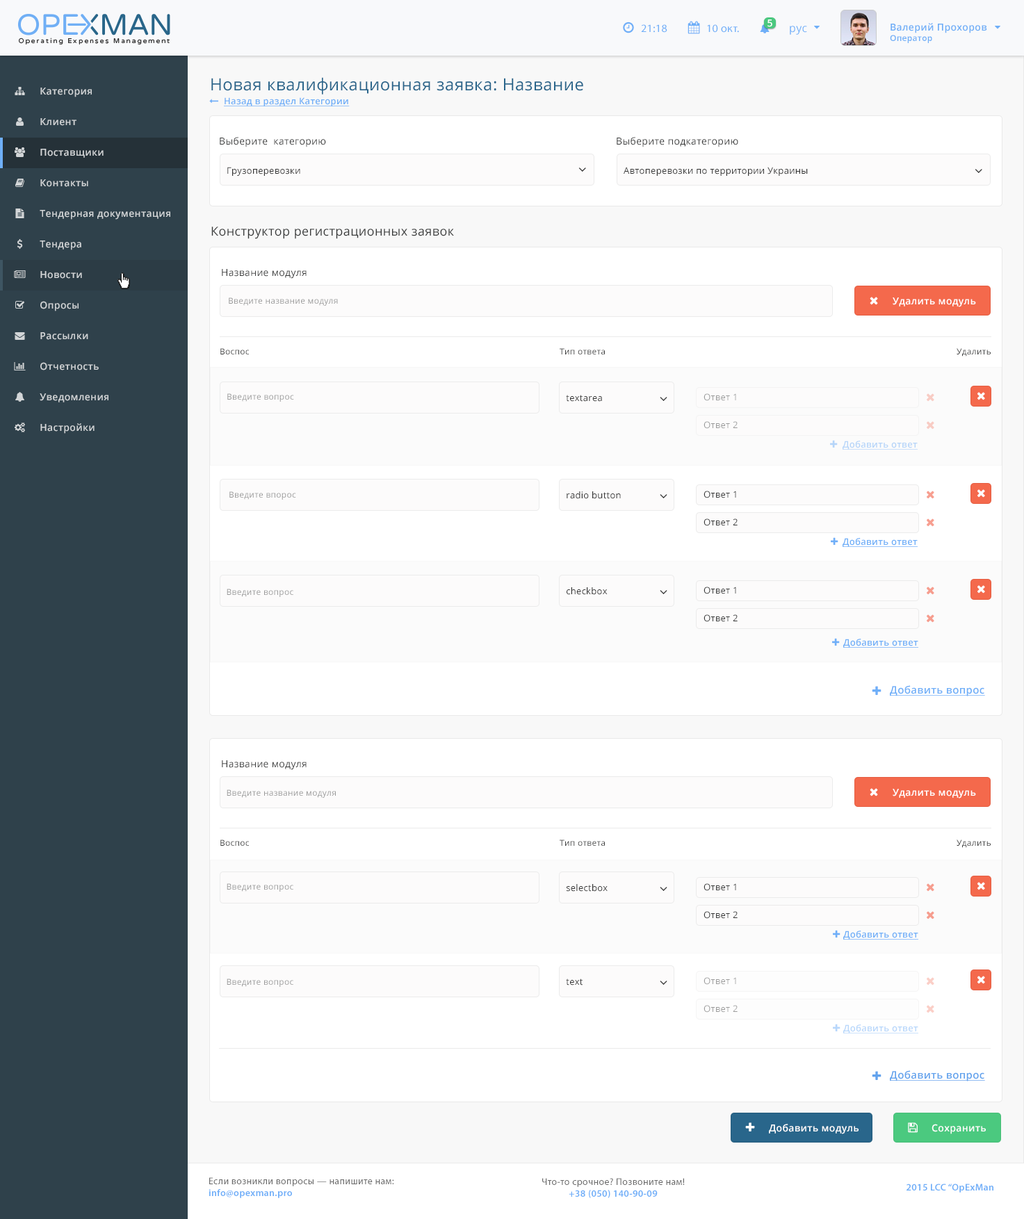
<style>
.page{position:relative;width:1024px;height:1219px;background:#ffffff}
.page>*{position:absolute;margin:0}
.t1{font:11.1px "MyriadPro-Regular";letter-spacing:0.025em;color:#6faff8}
.t2{font:9.7px "OpenSans-Semibold";letter-spacing:0.025em;color:#ffffff}
.t3{font:11.1px "OpenSans";letter-spacing:0.025em;color:#6eaff8}
.t4{font:9.7px "OpenSans-Semibold";letter-spacing:0.025em;color:#6eaef7}
.t5{font:8.3px "OpenSans-Semibold";letter-spacing:0.025em;color:#6eaef7}
.t6{font:16.6px "OpenSans";letter-spacing:0.025em;color:#29658b}
.t7{font:9.7px "OpenSans-Semibold";letter-spacing:0.025em;color:#d2d5d7}
.t8{font:9px "OpenSans-Semibold";letter-spacing:0.025em;color:#6faff8;text-decoration:underline}
.t9{font:9.7px "OpenSans";letter-spacing:0.025em;color:#373838}
.t10{font:9px "OpenSans";letter-spacing:0.025em;color:#333333}
.t11{font:12.5px "OpenSans";letter-spacing:0.025em;color:#373838}
.t12{font:8.3px "OpenSans";letter-spacing:0.025em;color:#999999}
.t13{font:8.3px "OpenSans";letter-spacing:0.025em;color:#373838}
.t14{font:9px "OpenSans";letter-spacing:0.025em;color:#999999}
.t15{font:9px "OpenSans-Semibold";letter-spacing:0.025em;color:#b5d5f9;text-decoration:underline}
.t16{font:9px "OpenSans";letter-spacing:0.025em;color:#373838}
.t17{font:10.4px "OpenSans-Semibold";letter-spacing:0.025em;color:#6faff8;text-decoration:underline}
.t18{font:9px "OpenSans";letter-spacing:0.025em;color:#9b9b9b}
.t19{font:9px "OpenSans-Semibold";letter-spacing:0.025em;color:#b7d7fb;text-decoration:underline}
.t20{font:10.4px "OpenSans-Semibold";letter-spacing:0.025em;color:#62a3ed;text-decoration:underline}
.t21{font:9.7px "MyriadPro-Regular";letter-spacing:0.025em;color:#696969}
.t22{font:9.7px "MyriadPro-Semibold";letter-spacing:0.025em;color:#6eaef8}
</style>
<div class="page">
<p class="t1" style="left:641px;top:24px;width:26px;height:9px">21:18</p>
<p class="t1" style="left:707px;top:24px;width:32px;height:9px">10 окт.</p>
<p class="t2" style="left:767px;top:19px;width:5px;height:8px">5</p>
<p class="t3" style="left:789px;top:26px;width:18px;height:9px">рус</p>
<p class="t4" style="left:889px;top:23px;width:98px;height:20px">Валерий Прохоров<br><span class="t5">Оператор</span></p>
<p class="t6" style="left:211px;top:77px;width:372px;height:18px">Новая квалификационная заявка: Название</p>
<p class="t7" style="left:40px;top:88px;width:52px;height:9px">Категория</p>
<p class="t8" style="left:224px;top:97px;width:126px;height:9px">Назад в раздел Категории</p>
<p class="t7" style="left:40px;top:118px;width:36px;height:8px">Клиент</p>
<p class="t9" style="left:220px;top:137px;width:106px;height:10px">Выберите  категорию</p>
<p class="t9" style="left:616px;top:137px;width:122px;height:10px">Выберите подкатегорию</p>
<p class="t7" style="left:40px;top:149px;width:64px;height:9px">Поставщики</p>
<p class="t10" style="left:227px;top:167px;width:73px;height:9px">Грузоперевозки</p>
<p class="t10" style="left:623px;top:167px;width:184px;height:9px">Автоперевозки по территории Украины</p>
<p class="t7" style="left:40px;top:179px;width:48px;height:8px">Контакты</p>
<p class="t7" style="left:40px;top:210px;width:130px;height:10px">Тендерная документация</p>
<p class="t11" style="left:211px;top:227px;width:243px;height:12px">Конструктор регистрационных заявок</p>
<p class="t7" style="left:40px;top:240px;width:41px;height:10px">Тендера</p>
<p class="t9" style="left:222px;top:269px;width:84px;height:10px">Название модуля</p>
<p class="t7" style="left:40px;top:271px;width:42px;height:8px">Новости</p>
<p class="t7" style="left:40px;top:301px;width:39px;height:10px">Опросы</p>
<p class="t12" style="left:229px;top:297px;width:109px;height:9px">Введите название модуля</p>
<p class="t2" style="left:892px;top:297px;width:84px;height:10px">Удалить модуль</p>
<p class="t7" style="left:40px;top:332px;width:48px;height:8px">Рассылки</p>
<p class="t13" style="left:220px;top:348px;width:29px;height:6px">Воспос</p>
<p class="t13" style="left:559px;top:348px;width:46px;height:6px">Тип ответа</p>
<p class="t13" style="left:956px;top:348px;width:34px;height:8px">Удалить</p>
<p class="t7" style="left:40px;top:362px;width:59px;height:8px">Отчетность</p>
<p class="t7" style="left:40px;top:393px;width:68px;height:9px">Уведомления</p>
<p class="t12" style="left:227px;top:393px;width:67px;height:9px">Введите вопрос</p>
<p class="t10" style="left:566px;top:395px;width:36px;height:7px">textarea</p>
<p class="t14" style="left:703px;top:393px;width:33px;height:8px">Ответ 1</p>
<p class="t7" style="left:40px;top:423px;width:55px;height:11px">Настройки</p>
<p class="t14" style="left:703px;top:421px;width:34px;height:8px">Ответ 2</p>
<p class="t15" style="left:842px;top:441px;width:75px;height:9px">Добавить ответ</p>
<p class="t12" style="left:229px;top:491px;width:67px;height:9px">Введите впорос</p>
<p class="t10" style="left:566px;top:491px;width:55px;height:8px">radio button</p>
<p class="t16" style="left:703px;top:491px;width:33px;height:7px">Ответ 1</p>
<p class="t16" style="left:703px;top:518px;width:34px;height:8px">Ответ 2</p>
<p class="t8" style="left:842px;top:538px;width:75px;height:9px">Добавить ответ</p>
<p class="t12" style="left:227px;top:589px;width:66px;height:8px">Введите вопрос</p>
<p class="t10" style="left:566px;top:587px;width:41px;height:8px">checkbox</p>
<p class="t16" style="left:703px;top:586px;width:33px;height:8px">Ответ 1</p>
<p class="t16" style="left:703px;top:614px;width:34px;height:8px">Ответ 2</p>
<p class="t8" style="left:843px;top:639px;width:75px;height:9px">Добавить ответ</p>
<p class="t17" style="left:889px;top:685px;width:96px;height:11px">Добавить вопрос</p>
<p class="t9" style="left:222px;top:760px;width:84px;height:10px">Название модуля</p>
<p class="t12" style="left:227px;top:789px;width:109px;height:9px">Введите название модуля</p>
<p class="t2" style="left:892px;top:789px;width:84px;height:9px">Удалить модуль</p>
<p class="t13" style="left:220px;top:839px;width:29px;height:7px">Воспос</p>
<p class="t13" style="left:559px;top:839px;width:46px;height:7px">Тип ответа</p>
<p class="t13" style="left:956px;top:839px;width:34px;height:9px">Удалить</p>
<p class="t12" style="left:227px;top:883px;width:66px;height:9px">Введите вопрос</p>
<p class="t10" style="left:566px;top:884px;width:41px;height:8px">selectbox</p>
<p class="t16" style="left:703px;top:883px;width:33px;height:8px">Ответ 1</p>
<p class="t16" style="left:703px;top:911px;width:34px;height:8px">Ответ 2</p>
<p class="t8" style="left:843px;top:930px;width:75px;height:10px">Добавить ответ</p>
<p class="t18" style="left:703px;top:977px;width:33px;height:8px">Ответ 1</p>
<p class="t12" style="left:227px;top:978px;width:66px;height:9px">Введите вопрос</p>
<p class="t10" style="left:566px;top:978px;width:16px;height:7px">text</p>
<p class="t18" style="left:703px;top:1005px;width:34px;height:7px">Ответ 2</p>
<p class="t19" style="left:843px;top:1024px;width:75px;height:9px">Добавить ответ</p>
<p class="t20" style="left:889px;top:1070px;width:96px;height:11px">Добавить вопрос</p>
<p class="t2" style="left:769px;top:1124px;width:89px;height:10px">Добавить модуль</p>
<p class="t2" style="left:931px;top:1124px;width:54px;height:10px">Сохранить</p>
<p class="t21" style="left:208px;top:1177px;width:186px;height:21px">Если возникли вопросы — напишите нам:<br><span class="t22">info@opexman.pro</span></p>
<p class="t21" style="left:542px;top:1178px;width:142px;height:20px;text-align:center">Что-то срочное? Позвоните нам!<br><span class="t22">+38 (050) 140-90-09</span></p>
<p class="t22" style="left:906px;top:1183px;width:87px;height:9px">2015 LCC “OpExMan</p>
</div>
